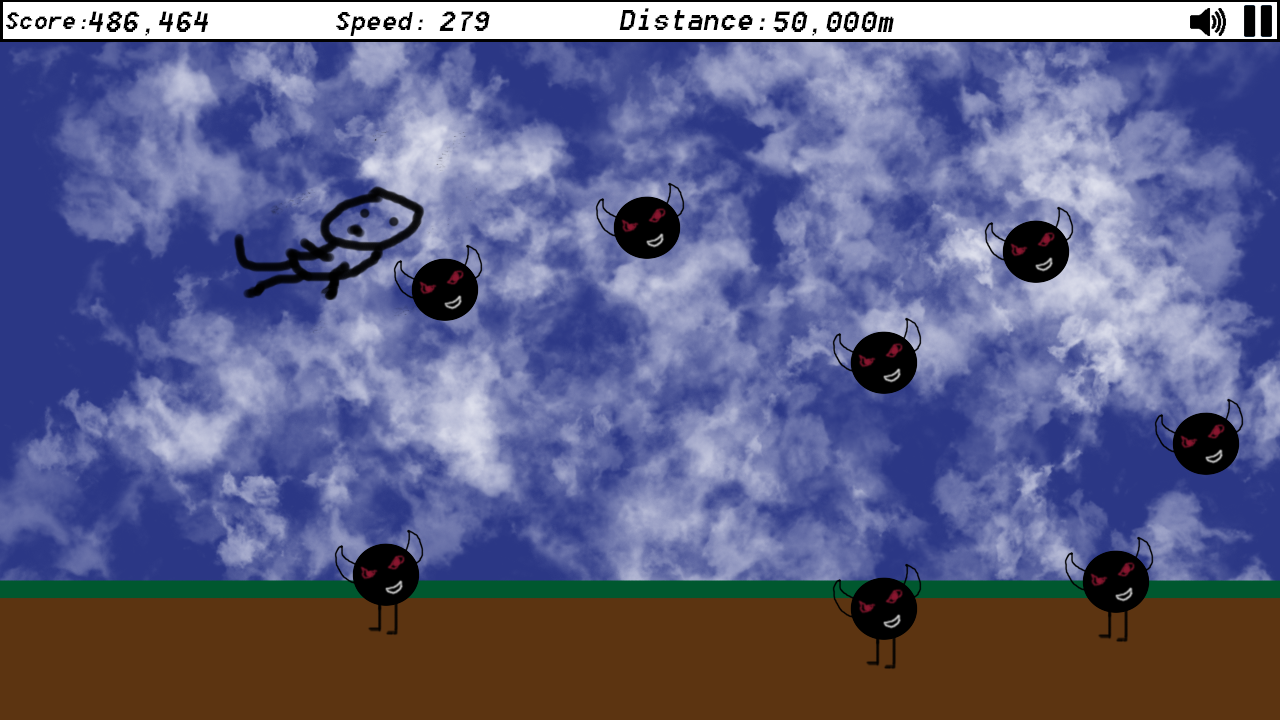
<style>
.page{position:relative;width:1280px;height:720px}
.page>*{position:absolute;margin:0}
.t1{font:29.7px "8514oem";letter-spacing:0.011em;color:#000000;font-style:italic}
.t2{font:36.4px "8514oem";letter-spacing:0.011em;color:#000000;font-style:italic}
.t3{font:32.2px "8514oem";letter-spacing:0.011em;color:#000000;font-style:italic}
.t4{font:34.7px "8514oem";letter-spacing:0.011em;color:#000000;font-style:italic}
.t5{font:35.6px "8514oem";letter-spacing:0.011em;color:#000000;font-style:italic}
</style>
<div class="page">
<p class="t1" style="left:6px;top:12px;width:80px;height:17px">Score:</p>
<p class="t2" style="left:89px;top:11px;width:119px;height:25px">486,464</p>
<p class="t3" style="left:336px;top:12px;width:87px;height:24px">Speed:</p>
<p class="t4" style="left:439px;top:11px;width:51px;height:20px">279</p>
<p class="t5" style="left:619px;top:8px;width:146px;height:22px">Distance:</p>
<p class="t2" style="left:773px;top:11px;width:121px;height:25px">50,000m</p>
</div>
